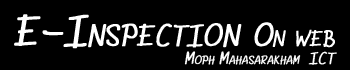
<style>
.page{position:relative;width:350px;height:70px;background:#000000}
.page>*{position:absolute;margin:0}
.t1{font:64.4px "4711_AtNoon_BigHead";color:#ffffff;font-variant:small-caps;font-weight:bold;font-style:italic}
.t2{font:46.4px "4711_AtNoon_BigHead";color:#ffffff;font-variant:small-caps;font-weight:bold;font-style:italic}
.t3{font:24.4px "4711_AtNoon_BigHead";color:#ffffff;font-variant:small-caps;font-weight:bold;font-style:italic}
</style>
<div class="page">
<p class="t1" style="left:14px;top:14px;width:321px;height:35px">E-Inspection <span class="t2">On web</span></p>
<p class="t3" style="left:184px;top:51px;width:153px;height:14px">Moph Mahasarakham  ICT</p>
</div>
